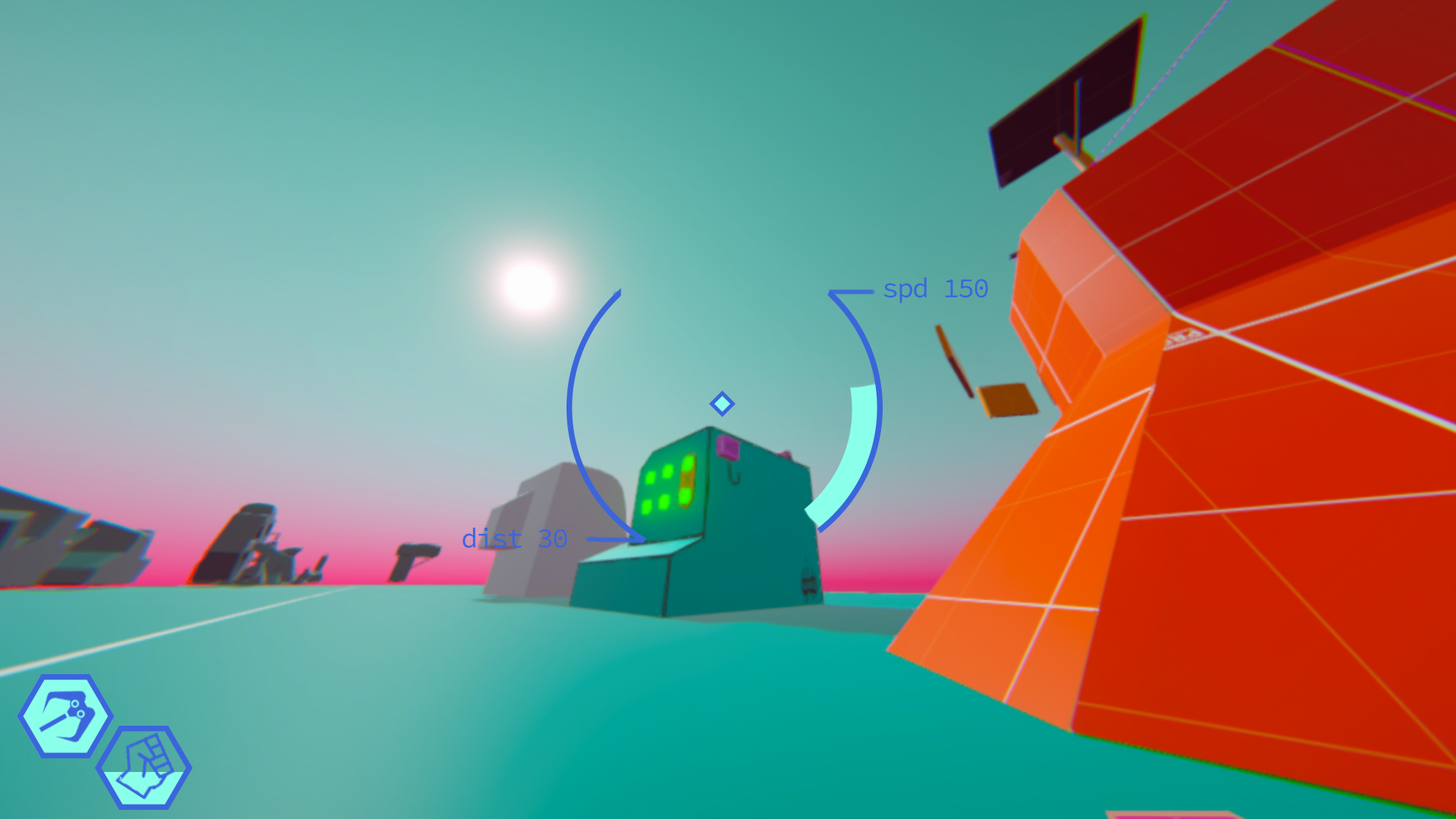
<style>
.page{position:relative;width:1456px;height:819px}
.page>*{position:absolute;margin:0}
.t1{font:28.1px "SourceCodeVariable-Roman";letter-spacing:-0.06em;color:#3b66db}
</style>
<div class="page">
<p class="t1" style="left:883px;top:277px;width:105px;height:26px">spd 150</p>
<p class="t1" style="left:463px;top:527px;width:104px;height:21px">dist 30</p>
</div>
